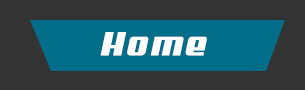
<style>
.page{position:relative;width:305px;height:90px;background:#333333}
.page>*{position:absolute;margin:0}
.t1{font:33.3px "Aero";letter-spacing:0.06em;color:#fffefe;font-weight:bold}
</style>
<div class="page">
<p class="t1" style="left:100px;top:32px;width:107px;height:24px">Home</p>
</div>
